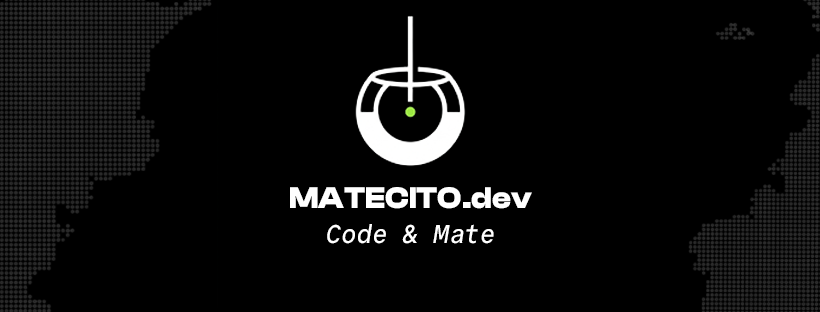
<style>
.page{position:relative;width:820px;height:312px;background:#000000}
.page>*{position:absolute;margin:0}
.t1{font:30.8px "ClashDisplay-Bold";color:#ffffff}
.t2{font:25.6px "CommitMono-500Italic";color:#ffffff}
</style>
<div class="page">
<p class="t1" style="left:290px;top:187px;width:242px;height:22px">MATECITO.dev</p>
<p class="t2" style="left:327px;top:224px;width:167px;height:20px">Code &amp; Mate</p>
</div>
